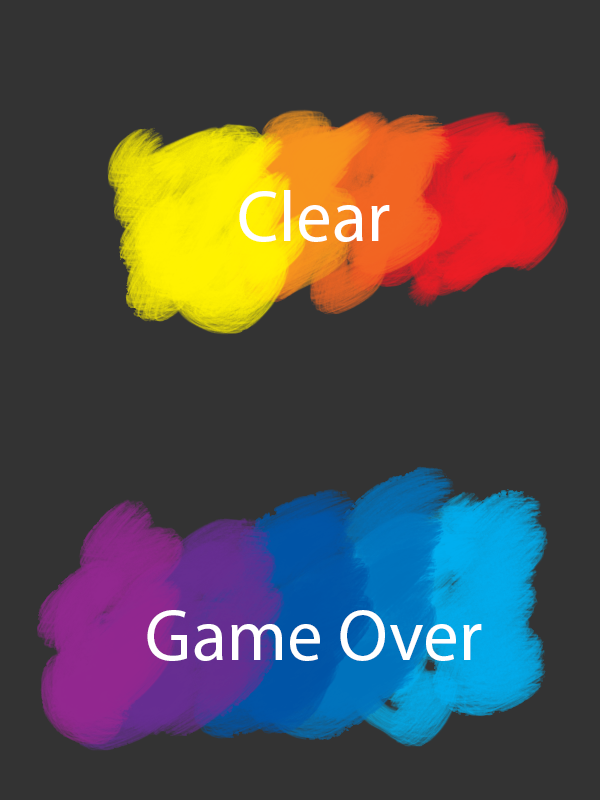
<style>
.page{position:relative;width:600px;height:800px;background:#333333}
.page>*{position:absolute;margin:0}
.t1{font:72px "MyriadPro-Regular";color:#ffffff}
</style>
<div class="page">
<p class="t1" style="left:239px;top:190px;width:151px;height:52px">Clear</p>
<p class="t1" style="left:147px;top:610px;width:335px;height:51px">Game Over</p>
</div>
